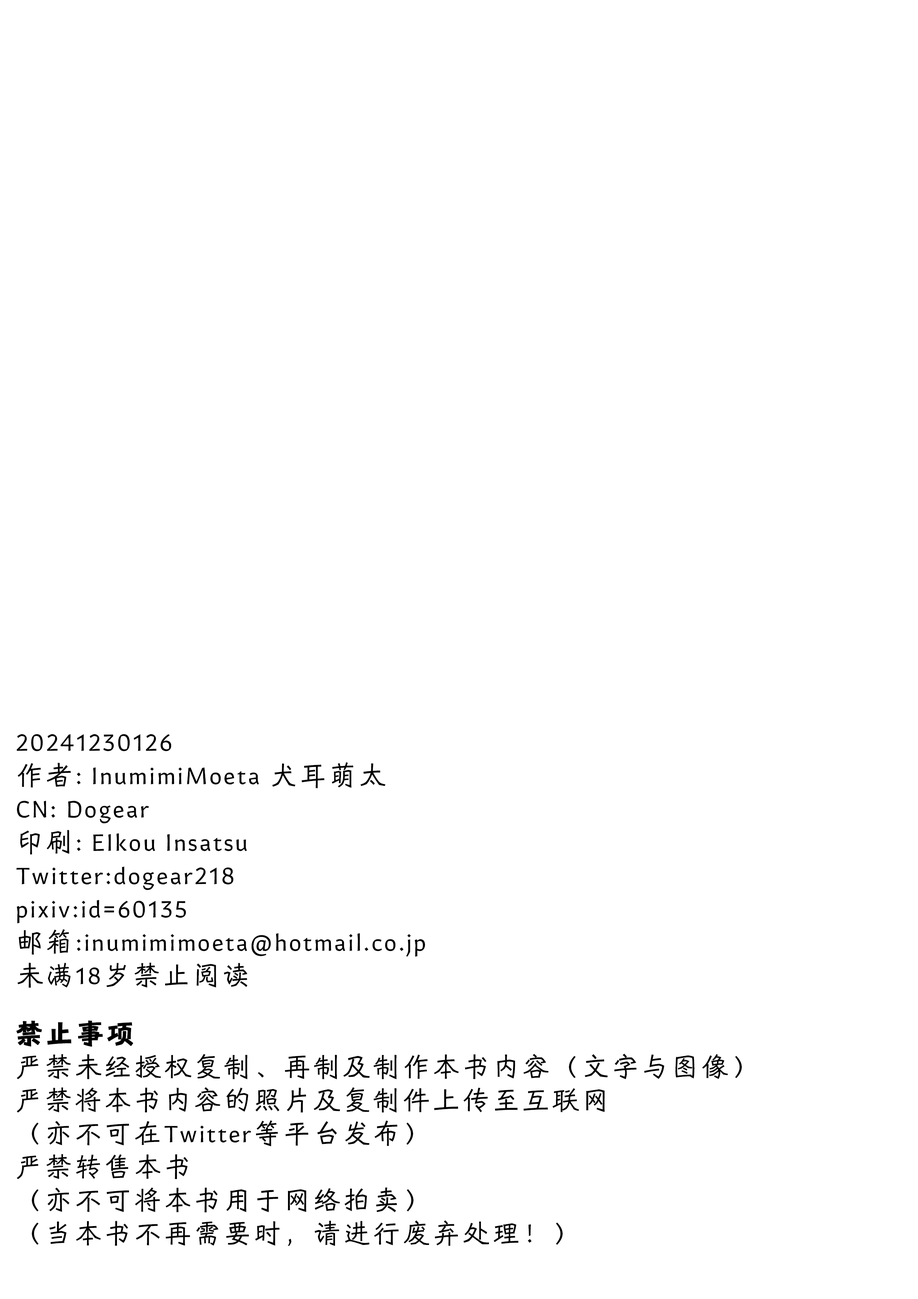
<style>
.page{position:relative;width:918px;height:1299px;background:#ffffff}
.page>*{position:absolute;margin:0}
.t1{font:27.8px "HYShiWei55U";letter-spacing:0.075em;color:#000000}
.t2{font:27.8px "HYShiWei75U";letter-spacing:0.075em;color:#000000;font-weight:bold}
</style>
<div class="page">
<p class="t1" style="left:16px;top:734px;width:409px;height:254px">20241230126<br>作者: InumimiMoeta 犬耳萌太<br>CN: Dogear<br>印刷: EIkou Insatsu<br>Twitter:dogear218<br>pixiv:id=60135<br>邮箱:inumimimoeta@hotmail.co.jp<br>未满18岁禁止阅读</p>
<p class="t1" style="left:16px;top:1020px;width:726px;height:226px"><span class="t2">禁止事项<br></span>严禁未经授权复制、再制及制作本书内容（文字与图像）<br>严禁将本书内容的照片及复制件上传至互联网<br>（亦不可在Twitter等平台发布）<br>严禁转售本书<br>（亦不可将本书用于网络拍卖）<br>（当本书不再需要时，请进行废弃处理！）</p>
</div>
